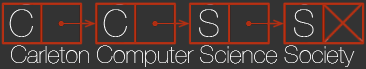
<style>
.page{position:relative;width:366px;height:69px;background:#333333}
.page>*{position:absolute;margin:0}
.t1{font:36px "HelveticaNeue-UltraLight";color:#ffffff}
.t2{font:24px "HelveticaNeue-UltraLight";color:#ffffff}
</style>
<div class="page">
<p class="t1" style="left:9px;top:9px;width:24px;height:28px">C</p>
<p class="t1" style="left:103px;top:9px;width:24px;height:28px">C</p>
<p class="t1" style="left:199px;top:9px;width:20px;height:28px">S</p>
<p class="t1" style="left:294px;top:9px;width:20px;height:28px">S</p>
<p class="t2" style="left:11px;top:45px;width:344px;height:22px">Carleton Computer Science Society</p>
</div>
